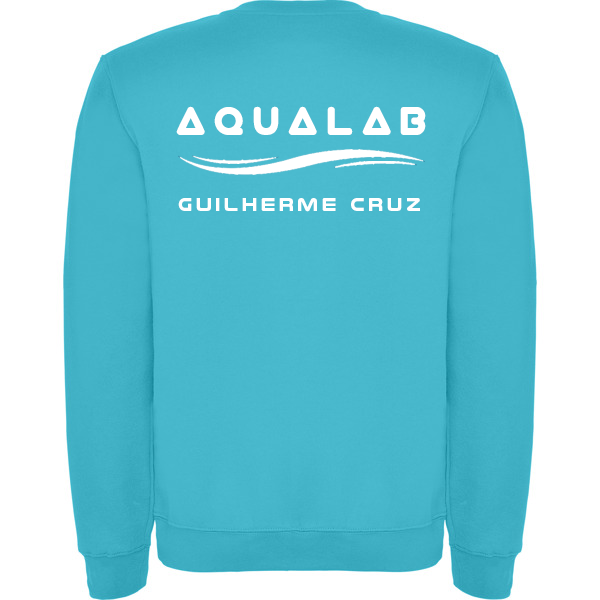
<style>
.page{position:relative;width:600px;height:600px;background:#ffffff}
.page>*{position:absolute;margin:0}
.t1{font:36px "Virgo01";letter-spacing:0.2em;color:#ffffff}
.t2{font:18px "Nulshock-Bold";letter-spacing:0.2em;color:#ffffff}
</style>
<div class="page">
<p class="t1" style="left:176px;top:106px;width:250px;height:29px">AquaLab</p>
<p class="t2" style="left:178px;top:198px;width:242px;height:14px">Guilherme Cruz</p>
</div>
